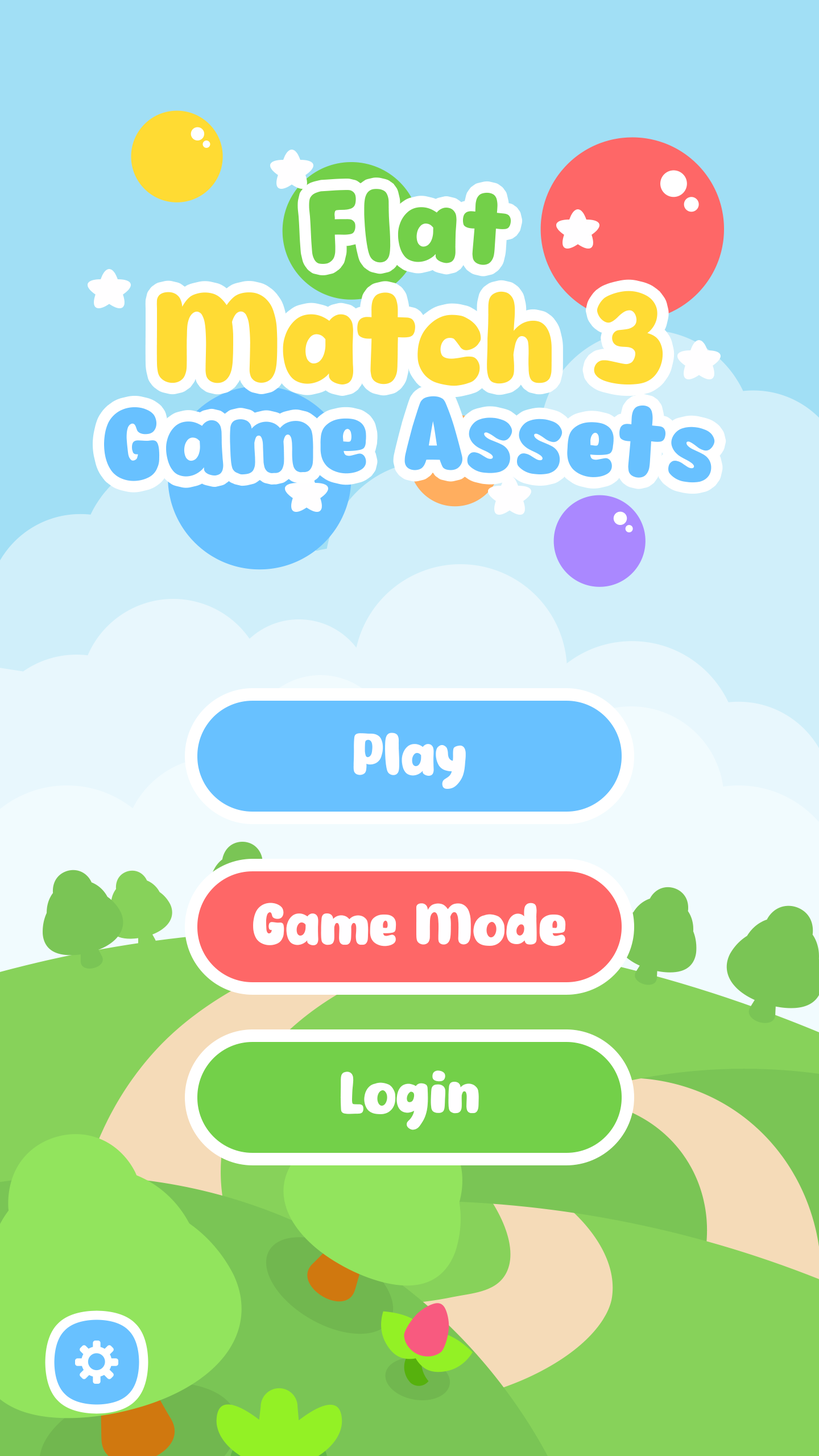
<style>
.page{position:relative;width:819px;height:1456px}
.page>*{position:absolute;margin:0}
.t1{font:99.6px "Eazy-Chat";letter-spacing:0.025em;color:#73d049}
.t2{font:125.8px "Eazy-Chat";color:#ffdb34}
.t3{font:99.6px "Eazy-Chat";letter-spacing:0.025em;color:#68c1ff}
.t4{font:56.9px "Eazy-Chat";color:#fffeff}
</style>
<div class="page">
<p class="t1" style="left:309px;top:189px;width:202px;height:76px">Flat</p>
<p class="t2" style="left:156px;top:291px;width:507px;height:95px">Match 3</p>
<p class="t3" style="left:104px;top:396px;width:611px;height:87px">Game Assets</p>
<p class="t4" style="left:353px;top:733px;width:113px;height:56px">Play</p>
<p class="t4" style="left:253px;top:903px;width:313px;height:43px">Game Mode</p>
<p class="t4" style="left:340px;top:1070px;width:139px;height:60px">Login</p>
</div>
